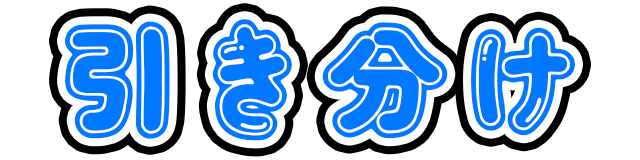
<style>
.page{position:relative;width:640px;height:160px;background:#ffffff}
.page>*{position:absolute;margin:0}
.t1{font:130px "DokiDokiFantasia";letter-spacing:0.02em;color:#0078ff}
</style>
<div class="page">
<p class="t1" style="left:65px;top:19px;width:510px;height:122px">引き分け</p>
</div>
